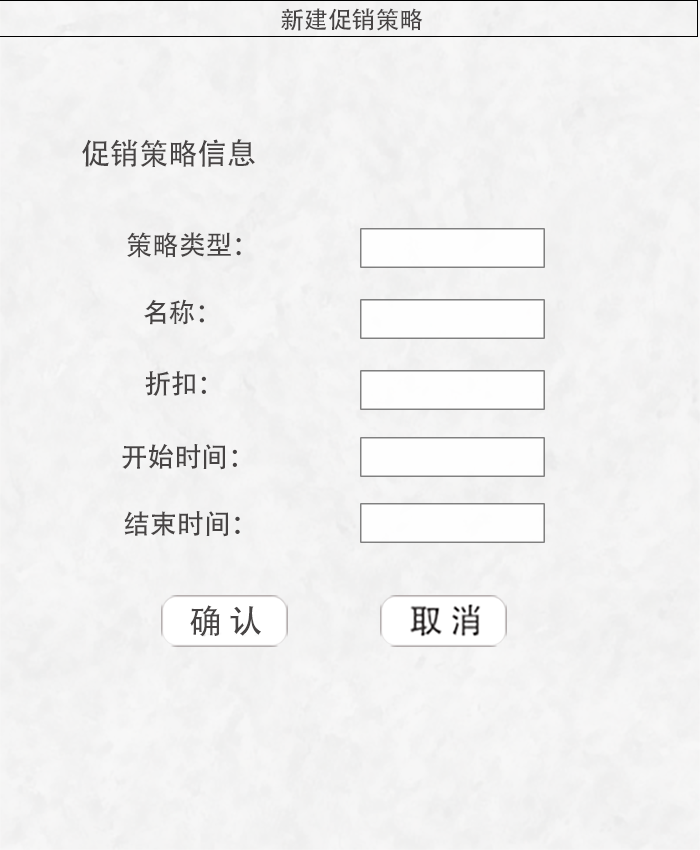
<style>
.page{position:relative;width:700px;height:850px}
.page>*{position:absolute;margin:0}
.t1{font:24px "AdobeHeitiStd-Regular";letter-spacing:-0.005em;color:#474444;text-transform:uppercase}
.t2{font:29.7px "AdobeHeitiStd-Regular";letter-spacing:-0.005em;color:#474444;text-transform:uppercase}
.t3{font:27px "AdobeHeitiStd-Regular";letter-spacing:-0.005em;color:#474444;text-transform:uppercase}
</style>
<div class="page">
<p class="t1" style="left:281px;top:8px;width:142px;height:23px">新建促销策略</p>
<p class="t2" style="left:82px;top:139px;width:173px;height:28px">促销策略信息</p>
<p class="t3" style="left:127px;top:232px;width:114px;height:26px">策略类型：</p>
<p class="t3" style="left:144px;top:299px;width:60px;height:26px">名称：</p>
<p class="t3" style="left:145px;top:371px;width:61px;height:25px">折扣：</p>
<p class="t3" style="left:122px;top:444px;width:115px;height:26px">开始时间：</p>
<p class="t3" style="left:124px;top:511px;width:116px;height:26px">结束时间：</p>
</div>
